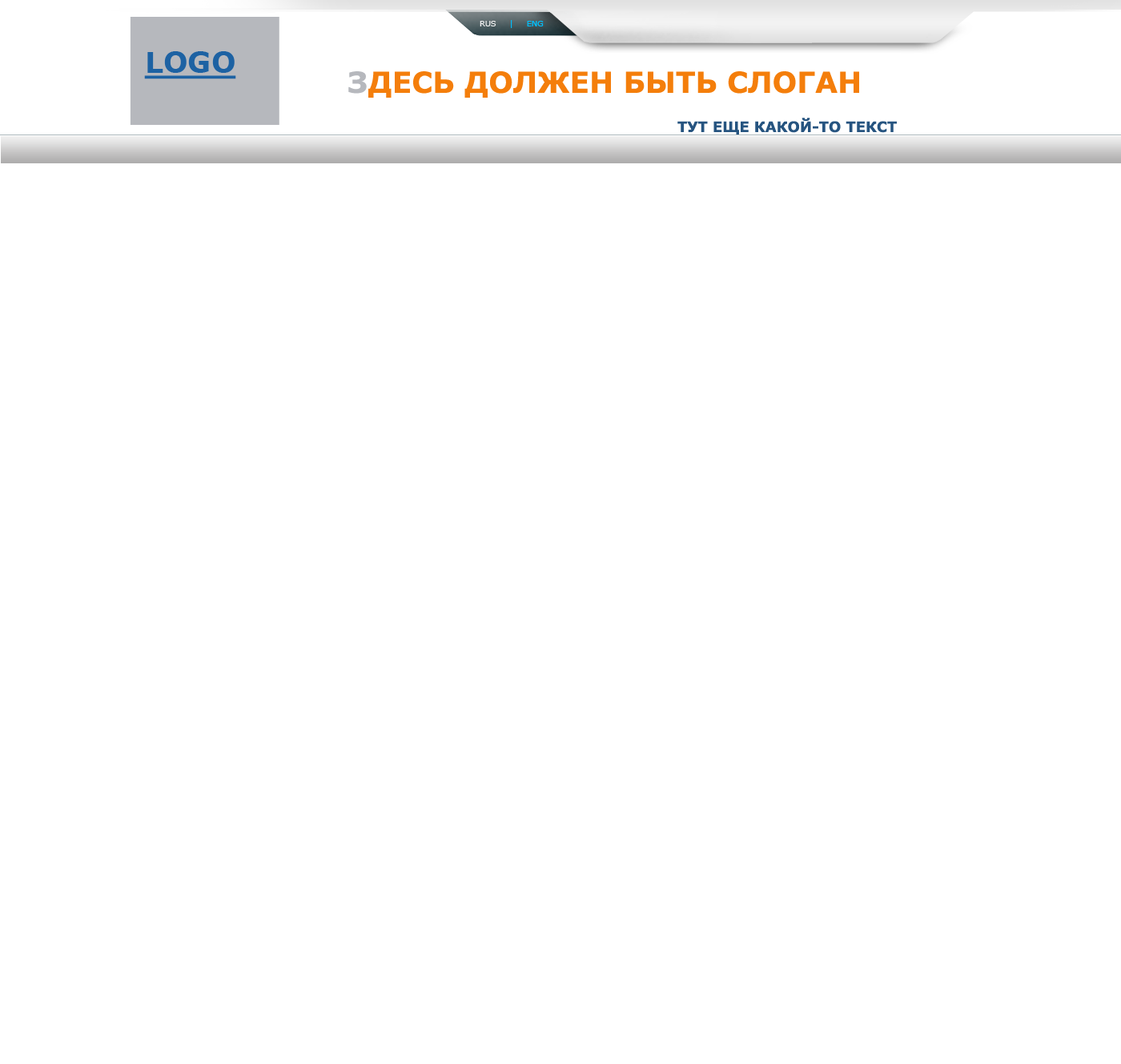
<style>
.page{position:relative;width:1121px;height:1064px;background:#ffffff}
.page>*{position:absolute;margin:0}
.t1{font:7.7px "Verdana";color:#00bffd;text-transform:uppercase}
.t2{font:7.7px "Verdana";color:#f0f0f0;text-transform:uppercase}
.t3{font:28.8px "Verdana-Bold";color:#1d62a3;text-decoration:underline}
.t4{font:28.8px "Verdana-Bold";color:#f47e0b;text-transform:uppercase}
.t5{font:28.8px "Verdana-Bold";color:#b6b8bd;text-transform:uppercase}
.t6{font:14.4px "Verdana-Bold";color:#265480;text-transform:uppercase}
</style>
<div class="page">
<p class="t1" style="left:480px;top:20px;width:64px;height:8px"><span class="t2">Rus   </span>  |     eng</p>
<p class="t3" style="left:144px;top:51px;width:92px;height:28px">LOGO</p>
<p class="t4" style="left:348px;top:71px;width:511px;height:27px"><span class="t5">З</span>десь должен быть слоган</p>
<p class="t6" style="left:677px;top:118px;width:220px;height:16px">Тут еще какой-то текст</p>
</div>
